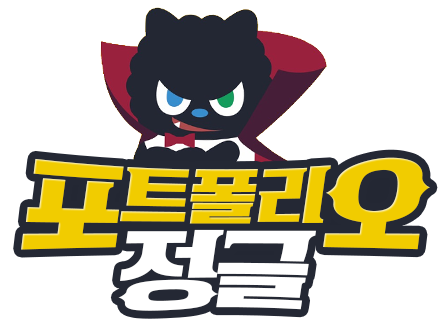
<style>
.page{position:relative;width:448px;height:323px;background:#ffffff}
.page>*{position:absolute;margin:0}
.t1{font:71.2px/75px "KoreanTIMS-R";letter-spacing:-0.02em;color:#f1cc00}
.t2{font:104.6px/83.3px "KoreanTIMS-R";letter-spacing:-0.02em;color:#f1cc00}
.t3{font:100.4px/66.7px "KoreanTIMS-R";letter-spacing:-0.04em;color:#ffffff}
</style>
<div class="page">
<p class="t1" style="left:21px;top:157px;width:409px;height:154px;text-align:center"><span class="t2">포</span>트폴리<span class="t2">오<br></span><span class="t3">정글</span></p>
</div>
